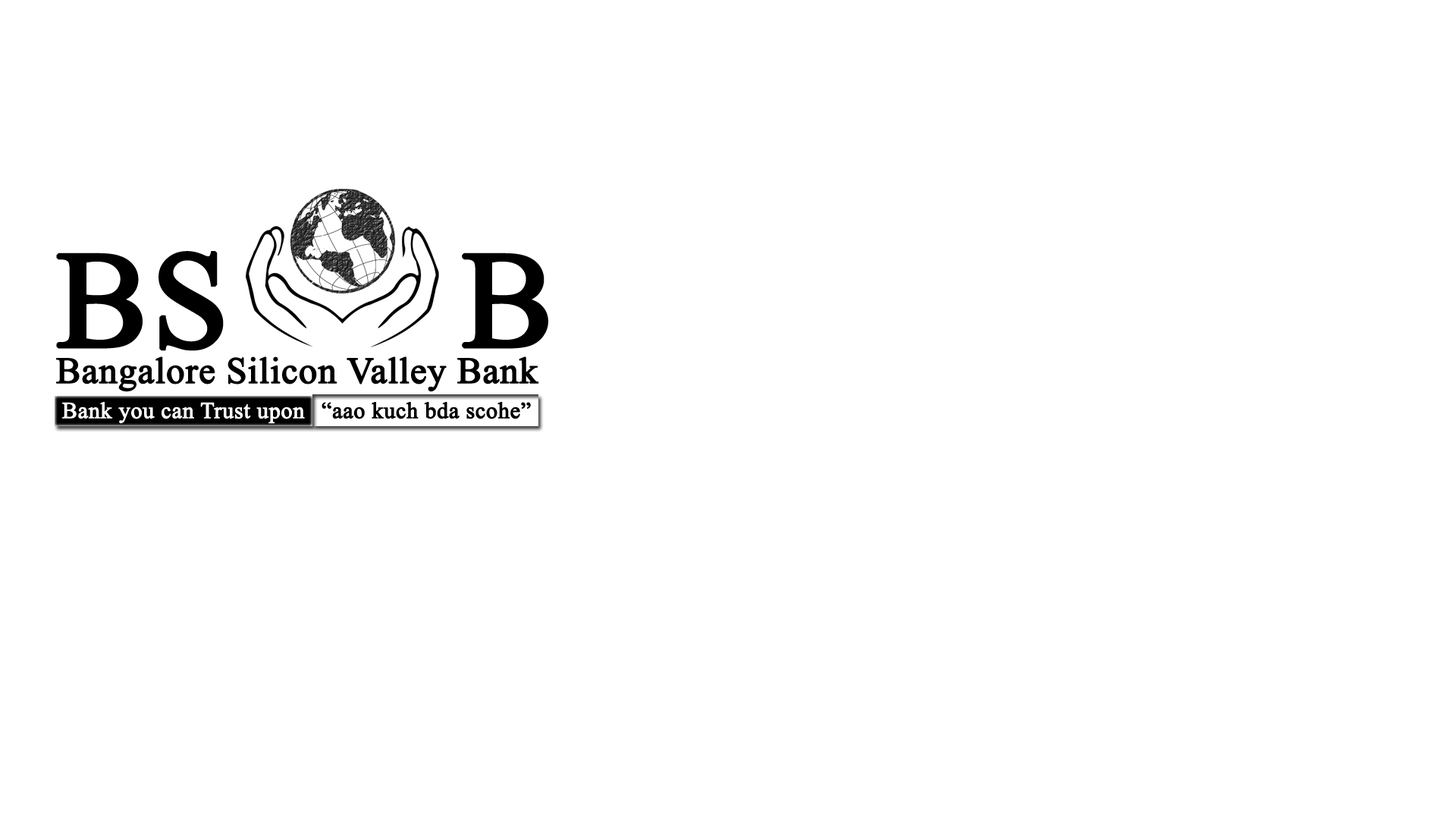
<style>
.page{position:relative;width:1456px;height:819px;background:#ffffff}
.page>*{position:absolute;margin:0}
.t1{font:36.8px/36.4px "TimesNewRomanPSMT";color:#000000;font-weight:bold}
.t2{font:138px "TimesNewRomanPSMT";color:#000000;font-weight:bold}
.t3{font:22.7px "TimesNewRomanPSMT";color:#ffffff;font-weight:bold}
.t4{font:22.7px "TimesNewRomanPSMT";color:#000000;font-weight:bold}
</style>
<div class="page">
<p class="t1" style="left:56px;top:251px;width:492px;height:141px"><span class="t2">BS      B<br></span>Bangalore Silicon Valley Bank</p>
<p class="t3" style="left:61px;top:402px;width:244px;height:22px">Bank you can Trust upon</p>
<p class="t4" style="left:322px;top:402px;width:209px;height:17px">“aao kuch bda scohe”</p>
</div>
